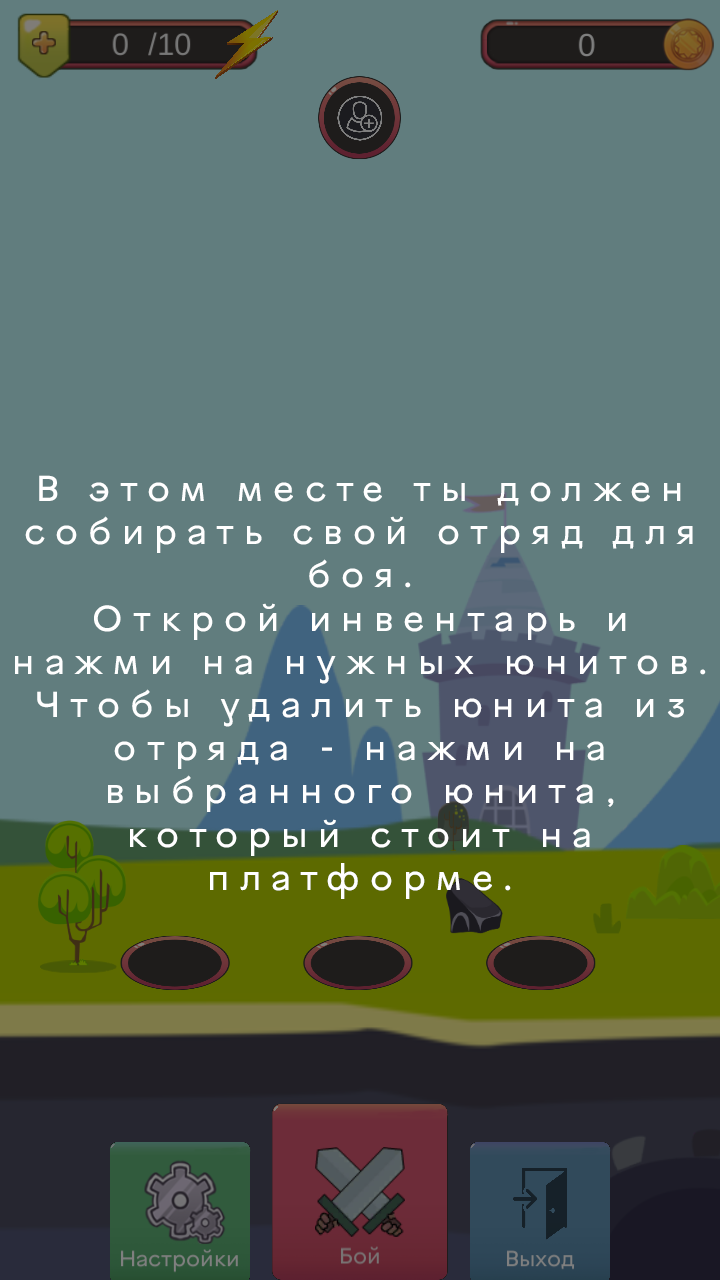
<style>
.page{position:relative;width:720px;height:1280px;background:#617d7e}
.page>*{position:absolute;margin:0}
.t1{font:36px "VinnytsiaSansReg";letter-spacing:0.28em;color:#ffffff}
</style>
<div class="page">
<p class="t1" style="left:15px;top:475px;width:691px;height:424px;text-align:center">В этом месте ты должен собирать свой отряд для боя.<br>Открой инвентарь и нажми на нужных юнитов.<br>Чтобы удалить юнита из отряда - нажми на выбранного юнита, который стоит на платформе.</p>
</div>
